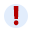
<style>
.page{position:relative;width:32px;height:32px;background:#ffffff}
.page>*{position:absolute;margin:0}
.t1{font:28.6px "SFCompactDisplay-Black";color:#b40000;scale:0.79 1}
</style>
<div class="page">
<p class="t1" style="left:13px;top:6px;width:6px;height:20px">!</p>
</div>
